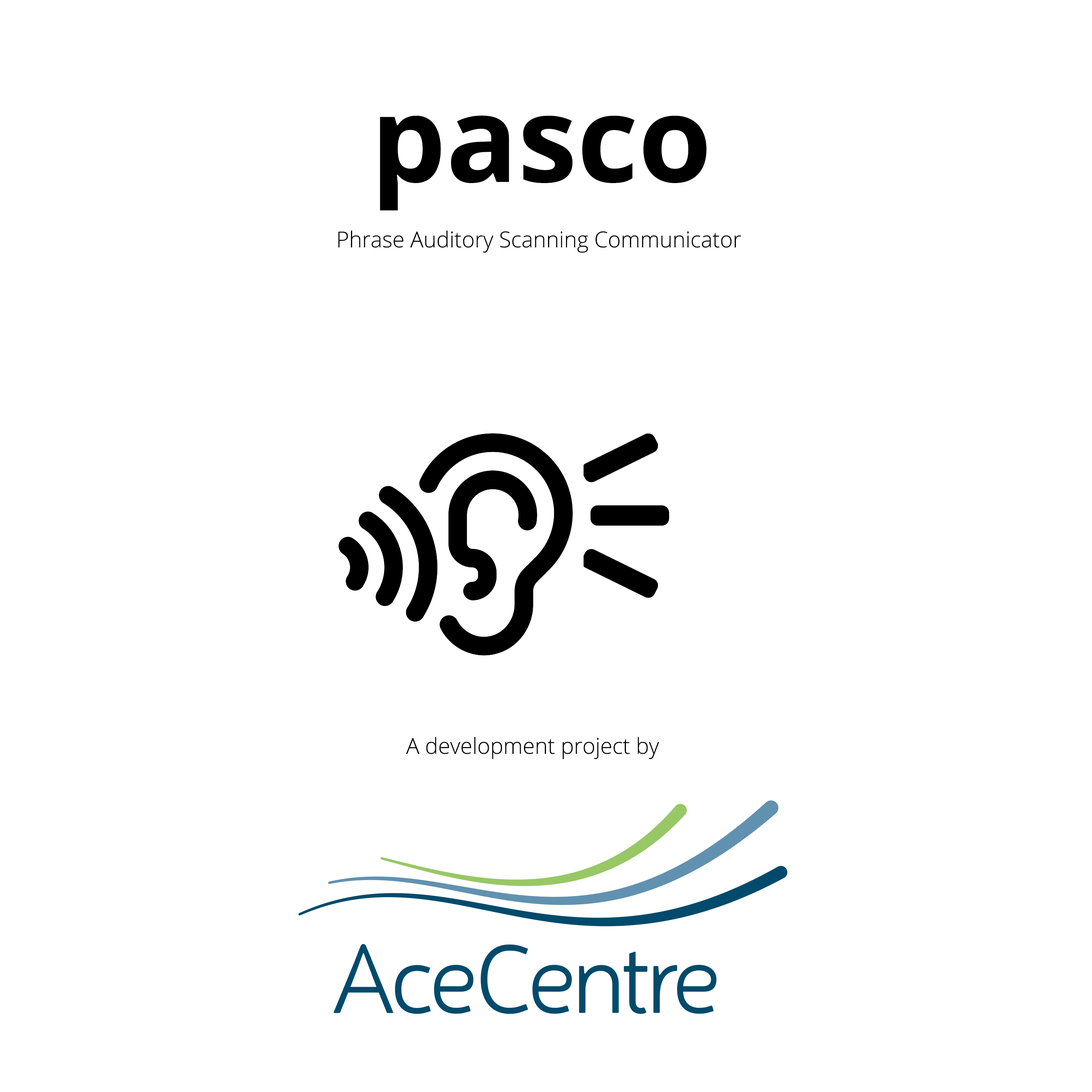
<style>
.page{position:relative;width:1092px;height:1092px;background:#ffffff}
.page>*{position:absolute;margin:0}
.t1{font:118.9px "OpenSans-Bold";color:#000000}
.t2{font:22px "OpenSans-Light";color:#000000}
</style>
<div class="page">
<p class="t1" style="left:380px;top:116px;width:327px;height:95px">pasco</p>
<p class="t2" style="left:338px;top:230px;width:403px;height:23px">Phrase Auditory Scanning Communicator</p>
<p class="t2" style="left:406px;top:737px;width:253px;height:22px">A development project by</p>
</div>
